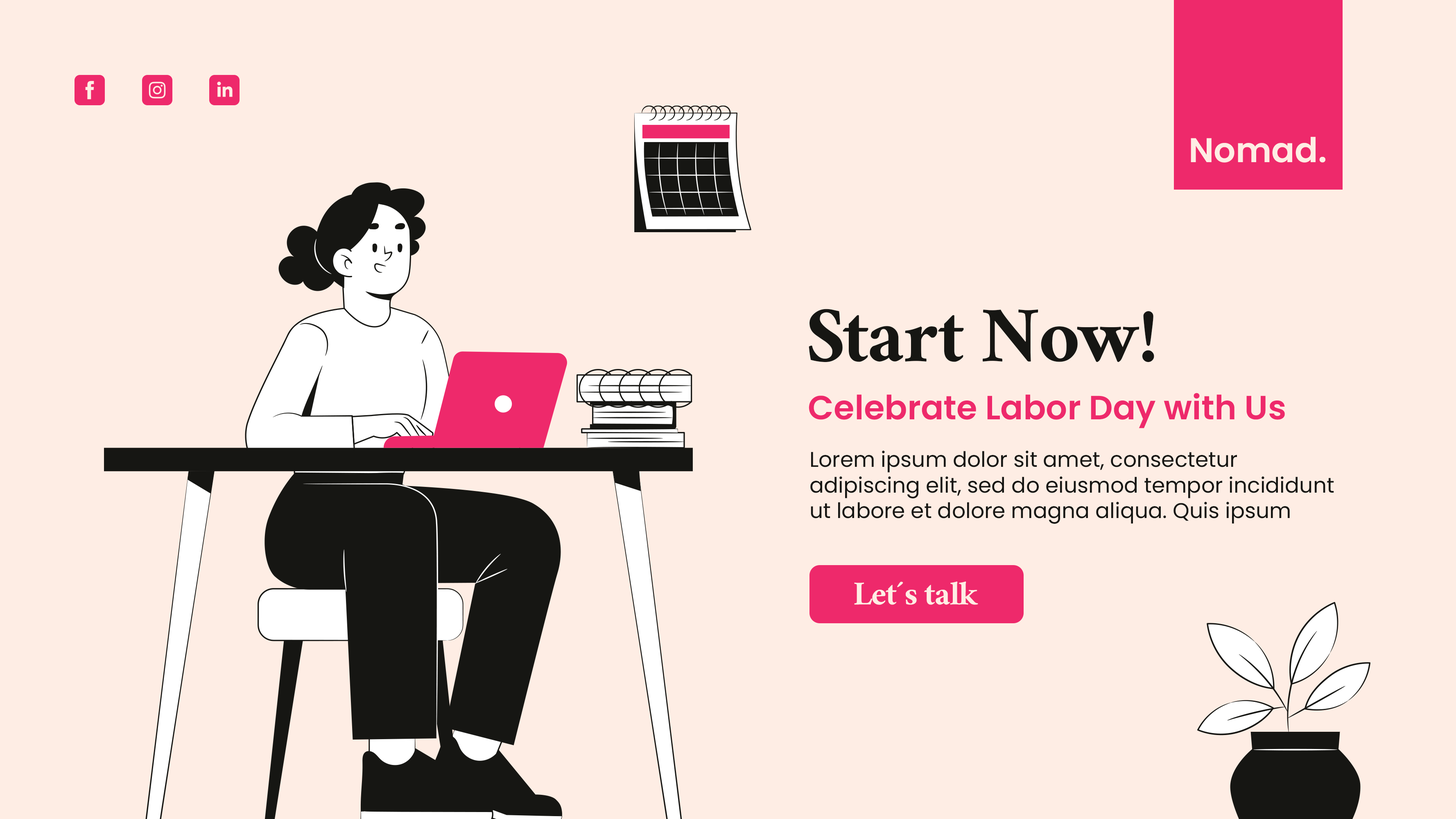
<style>
.page{position:relative;width:1456px;height:819px;background:#feede4}
.page>*{position:absolute;margin:0}
.t1{font:34.2px "Poppins-SemiBold";color:#feede4}
.t2{font:88.3px "Ramaraja";color:#161613}
.t3{font:33.5px "Poppins-SemiBold";color:#ee296b}
.t4{font:21.3px "Poppins-Regular";color:#161613}
.t5{font:37.5px "Ramaraja";color:#feede4}
</style>
<div class="page">
<p class="t1" style="left:1191px;top:137px;width:134px;height:26px">Nomad.</p>
<p class="t2" style="left:809px;top:309px;width:345px;height:53px">Start Now!</p>
<p class="t3" style="left:809px;top:393px;width:476px;height:35px">Celebrate Labor Day with Us</p>
<p class="t4" style="left:810px;top:450px;width:524px;height:74px">Lorem ipsum dolor sit amet, consectetur adipiscing elit, sed do eiusmod tempor incididunt ut labore et dolore magna aliqua. Quis ipsum suspendisse ultrices gravida. Risus commodo viverra maecenas accumsan lacus vel facilisis.</p>
<p class="t5" style="left:854px;top:581px;width:124px;height:24px">Let´s talk</p>
</div>
